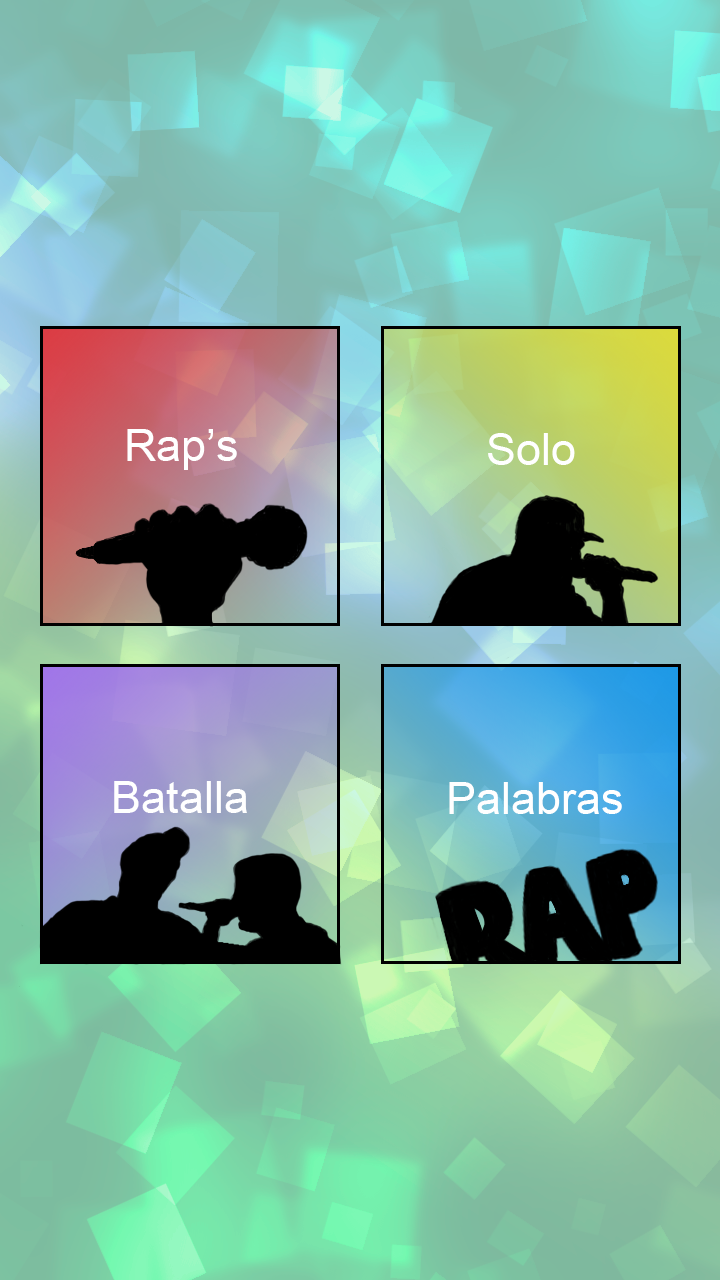
<style>
.page{position:relative;width:720px;height:1280px}
.page>*{position:absolute;margin:0}
.t1{font:44.8px "ArialMT";color:#ffffff}
.t2{font:45px "ArialMT";color:#ffffff}
</style>
<div class="page">
<p class="t1" style="left:127px;top:429px;width:110px;height:41px">Rap’s</p>
<p class="t1" style="left:488px;top:433px;width:87px;height:32px">Solo</p>
<p class="t2" style="left:114px;top:781px;width:133px;height:32px">Batalla</p>
<p class="t2" style="left:449px;top:782px;width:173px;height:32px">Palabras</p>
</div>
